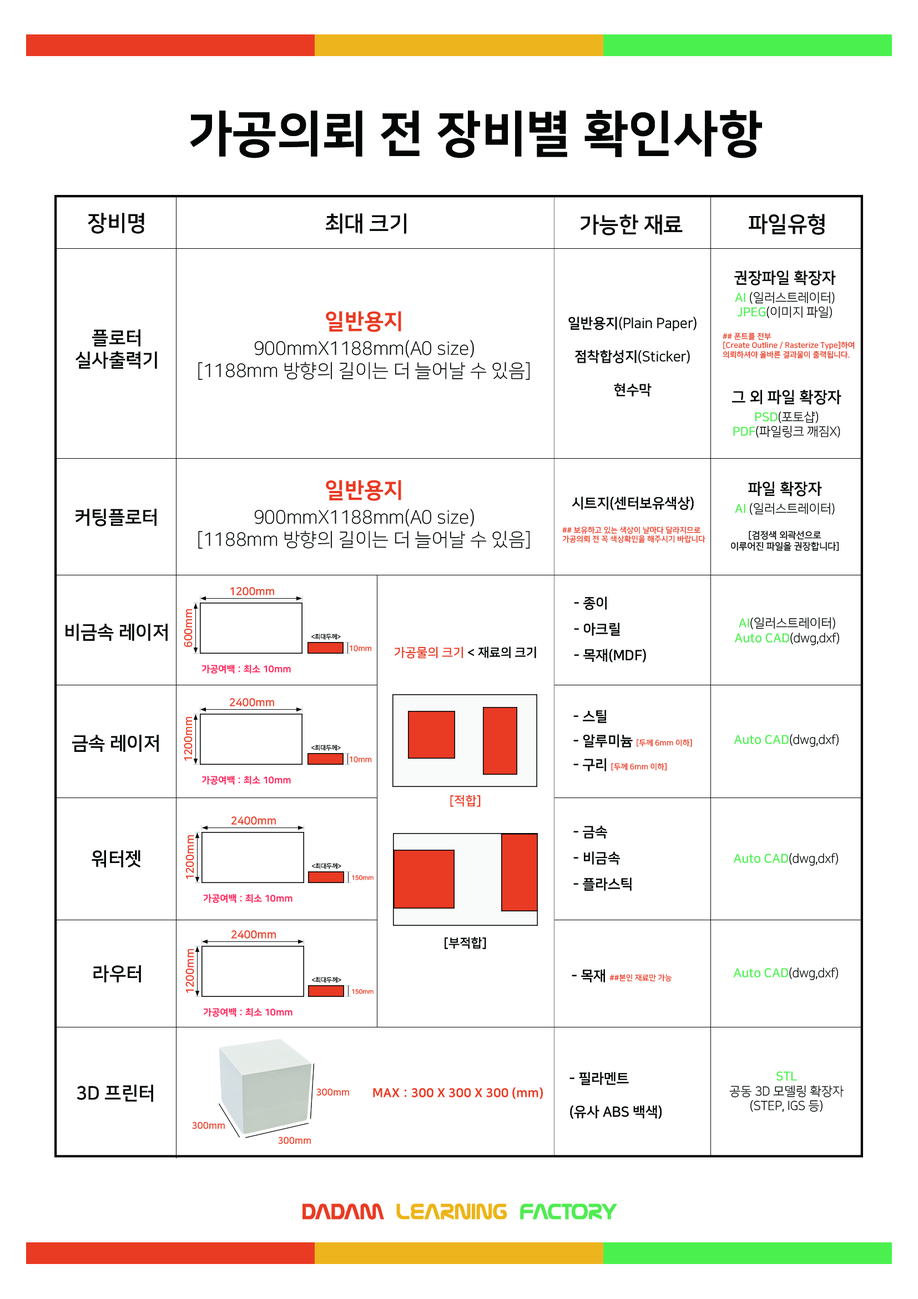
<style>
.page{position:relative;width:918px;height:1299px;background:#ffffff}
.page>*{position:absolute;margin:0}
.t1{font:49.3px "NanumSquareEB";color:#040606}
.t2{font:21.6px "NanumSquareB";color:#040606}
.t3{font:12.3px "NanumSquareL";color:#040606}
.t4{font:15.4px "NanumSquareB";color:#040606}
.t5{font:12.3px "NanumSquareB";color:#4af14e}
.t6{font:6.7px "NanumSquareL";color:#040606}
.t7{font:21.6px "NanumSquareEB";color:#e93a23}
.t8{font:13.9px "NanumSquareR";color:#040606}
.t9{font:13.9px "NanumSquareB";color:#040606}
.t10{font:18.5px "NanumSquareB";color:#040606}
.t11{font:7.7px "NanumSquareB";color:#e93a23}
.t12{font:9.3px "NanumSquareR";color:#040606}
.t13{font:10.8px "NanumSquareB";color:#e93a23}
.t14{font:6.2px "NanumSquareL";color:#040606}
.t15{font:12.3px "NanumSquareB";color:#040606}
.t16{font:12.3px "NanumSquareB";color:#e93a23}
.t17{font:9.3px "NanumSquareEB";color:#ff275c}
.t18{font:6.2px "NanumSquareB";color:#e93a23}
.t19{font:9.3px "NanumSquareB";color:#e93a23}
.t20{font:12.3px "NanumSquareEB";color:#e93a23}
</style>
<div class="page">
<p class="t1" style="left:190px;top:110px;width:572px;height:48px">가공의뢰 전 장비별 확인사항</p>
<p class="t2" style="left:88px;top:213px;width:56px;height:21px">장비명</p>
<p class="t2" style="left:326px;top:213px;width:80px;height:21px">최대 크기</p>
<p class="t2" style="left:581px;top:214px;width:102px;height:21px">가능한 재료</p>
<p class="t2" style="left:749px;top:214px;width:76px;height:21px">파일유형</p>
<p class="t3" style="left:735px;top:270px;width:101px;height:48px;text-align:center"><span class="t4">권장파일 확장자<br><br></span><span class="t5">AI</span> (일러스트레이터)<br><span class="t5">JPEG</span>(이미지 파일)</p>
<p class="t6" style="left:198px;top:311px;width:332px;height:69px;text-align:center"><span class="t7">일반용지<br><br></span>900mmX1188mm(A0 size)<br>[1188mm 방향의 길이는 더 늘어날 수 있음]</p>
<p class="t8" style="left:569px;top:316px;width:128px;height:80px;text-align:center"><span class="t9">일반용지</span>(Plain Paper)<br><br><span class="t9">점착합성지</span>(Sticker)<br><br><span class="t9">현수막</span></p>
<p class="t10" style="left:76px;top:329px;width:81px;height:40px;text-align:center">플로터<br>실사출력기</p>
<p class="t11" style="left:723px;top:333px;width:132px;height:26px">## 폰트를 전부 <br>[Create Outline / Rasterize Type]하여<br>의뢰하셔야 올바른 결과물이 출력됩니다.</p>
<p class="t4" style="left:732px;top:390px;width:110px;height:47px;text-align:center">그 외 파일 확장자<br><br><span class="t5">PSD</span><span class="t3">(포토샵)<br></span><span class="t5">PDF</span><span class="t3">(파일링크 깨짐X)</span></p>
<p class="t6" style="left:198px;top:480px;width:332px;height:69px;text-align:center"><span class="t7">일반용지<br><br></span>900mmX1188mm(A0 size)<br>[1188mm 방향의 길이는 더 늘어날 수 있음]</p>
<p class="t12" style="left:731px;top:481px;width:108px;height:70px;text-align:center"><span class="t4">파일 확장자<br><br></span><span class="t5">AI</span><span class="t3"> (일러스트레이터)<br><br></span>[검정색 외곽선으로<br>이루어진 파일을 권장합니다]</p>
<p class="t9" style="left:572px;top:496px;width:122px;height:14px">시트지(센터보유색상)</p>
<p class="t10" style="left:76px;top:509px;width:81px;height:17px">커팅플로터</p>
<p class="t11" style="left:562px;top:526px;width:144px;height:17px">## 보유하고 있는 색상이 날마다 달라지므로 <br>가공의뢰 전 꼭 색상확인을 해주시기 바랍니다</p>
<p class="t13" style="left:230px;top:587px;width:44px;height:8px">1200mm</p>
<p class="t9" style="left:574px;top:596px;width:72px;height:66px">- 종이<br><br>- 아크릴<br><br>- 목재(MDF)</p>
<p class="t13" style="left:184px;top:608px;width:9px;height:39px;rotate:-90deg">600mm</p>
<p class="t3" style="left:735px;top:617px;width:104px;height:28px;text-align:center"><span class="t5">AI</span>(일러스트레이터)<br><span class="t5">Auto CAD</span>(dwg,dxf)</p>
<p class="t10" style="left:66px;top:623px;width:102px;height:18px">비금속 레이저</p>
<p class="t14" style="left:311px;top:633px;width:30px;height:7px">&lt;최대두께&gt;</p>
<p class="t11" style="left:349px;top:645px;width:23px;height:6px">10mm</p>
<p class="t15" style="left:395px;top:646px;width:141px;height:12px"><span class="t16">가공물의 크기 </span>&lt; 재료의 크기</p>
<p class="t17" style="left:202px;top:664px;width:89px;height:9px">가공여백 : 최소 10mm</p>
<p class="t13" style="left:229px;top:698px;width:45px;height:8px">2400mm</p>
<p class="t9" style="left:574px;top:710px;width:118px;height:61px">- 스틸<br><br>- 알루미늄 <span class="t11">[두께 6mm 이하]<br><br></span>- 구리 <span class="t11">[두께 6mm 이하]</span></p>
<p class="t13" style="left:184px;top:716px;width:9px;height:45px;rotate:-90deg">1200mm</p>
<p class="t10" style="left:72px;top:735px;width:87px;height:17px">금속 레이저</p>
<p class="t3" style="left:734px;top:733px;width:105px;height:14px"><span class="t5">Auto CAD</span>(dwg,dxf)</p>
<p class="t14" style="left:311px;top:744px;width:30px;height:7px">&lt;최대두께&gt;</p>
<p class="t11" style="left:349px;top:756px;width:23px;height:6px">10mm</p>
<p class="t17" style="left:202px;top:775px;width:89px;height:9px">가공여백 : 최소 10mm</p>
<p class="t16" style="left:450px;top:794px;width:31px;height:13px">[적합]</p>
<p class="t13" style="left:231px;top:816px;width:45px;height:8px">2400mm</p>
<p class="t9" style="left:574px;top:825px;width:58px;height:66px">- 금속<br><br>- 비금속<br><br>- 플라스틱</p>
<p class="t13" style="left:185px;top:834px;width:9px;height:45px;rotate:-90deg">1200mm</p>
<p class="t10" style="left:92px;top:850px;width:48px;height:17px">워터젯</p>
<p class="t3" style="left:733px;top:852px;width:105px;height:14px"><span class="t5">Auto CAD</span>(dwg,dxf)</p>
<p class="t14" style="left:312px;top:863px;width:29px;height:6px">&lt;최대두께&gt;</p>
<p class="t18" style="left:352px;top:875px;width:22px;height:5px">150mm</p>
<p class="t17" style="left:203px;top:893px;width:90px;height:10px">가공여백 : 최소 10mm</p>
<p class="t13" style="left:231px;top:930px;width:45px;height:8px">2400mm</p>
<p class="t15" style="left:445px;top:937px;width:41px;height:12px">[부적합]</p>
<p class="t13" style="left:185px;top:948px;width:9px;height:45px;rotate:-90deg">1200mm</p>
<p class="t10" style="left:93px;top:965px;width:48px;height:17px">라우터</p>
<p class="t14" style="left:312px;top:977px;width:29px;height:6px">&lt;최대두께&gt;</p>
<p class="t11" style="left:572px;top:969px;width:100px;height:13px"><span class="t9">- 목재 </span>##본인 재료만 가능</p>
<p class="t3" style="left:733px;top:967px;width:105px;height:13px"><span class="t5">Auto CAD</span>(dwg,dxf)</p>
<p class="t18" style="left:352px;top:989px;width:22px;height:5px">150mm</p>
<p class="t17" style="left:203px;top:1007px;width:90px;height:10px">가공여백 : 최소 10mm</p>
<p class="t9" style="left:570px;top:1071px;width:92px;height:48px">- 필라멘트<br><br>(유사 ABS 백색)</p>
<p class="t3" style="left:730px;top:1071px;width:114px;height:41px;text-align:center"><span class="t5">STL<br></span>공동 3D 모델링 확장자<br>(STEP, IGS 등)</p>
<p class="t10" style="left:77px;top:1084px;width:76px;height:17px">3D 프린터</p>
<p class="t19" style="left:316px;top:1088px;width:33px;height:7px">300mm</p>
<p class="t20" style="left:373px;top:1087px;width:170px;height:12px">MAX : 300 X 300 X 300 (mm)</p>
<p class="t19" style="left:192px;top:1121px;width:33px;height:8px">300mm</p>
<p class="t19" style="left:278px;top:1136px;width:33px;height:8px">300mm</p>
</div>
